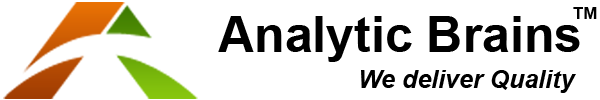
<style>
.page{position:relative;width:600px;height:100px;background:#ffffff}
.page>*{position:absolute;margin:0}
.t1{font:50px "Arial-BoldMT";color:#000000}
.t2{font:16.7px "Arial-BoldMT";color:#000000}
.t3{font:25px "Arial-BoldItalicMT";color:#000000}
</style>
<div class="page">
<p class="t1" style="left:218px;top:16px;width:362px;height:46px">Analytic Brains</p>
<p class="t2" style="left:573px;top:7px;width:24px;height:12px">TM</p>
<p class="t3" style="left:361px;top:70px;width:215px;height:23px">We deliver Quality</p>
</div>
